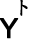
<style>
.page{position:relative;width:30px;height:39px;background:#ffffff}
.page>*{position:absolute;margin:0}
.t1{font:18px "DFKaiShu-SB-Estd-BF";color:#000000;font-weight:bold}
.t2{font:27px "ArialMT";color:#000000;font-weight:bold}
</style>
<div class="page">
<p class="t1" style="left:20px;top:0px;width:8px;height:16px">卜</p>
<p class="t2" style="left:0px;top:18px;width:19px;height:21px">Y</p>
</div>
